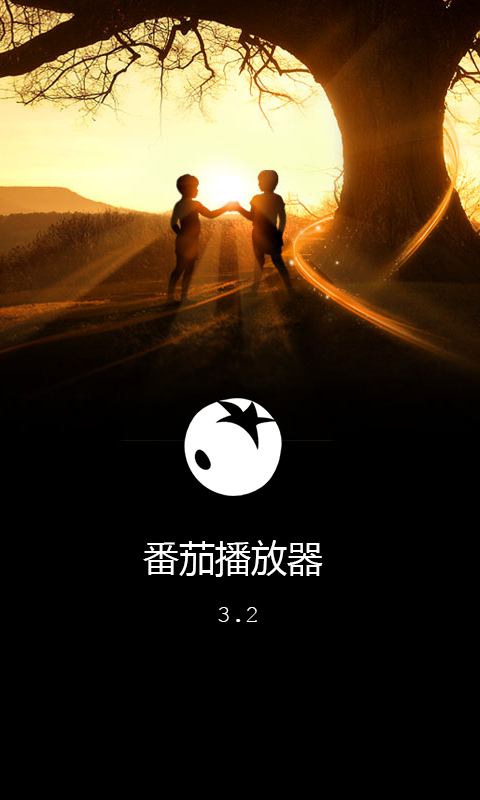
<style>
.page{position:relative;width:480px;height:800px;background:#000000}
.page>*{position:absolute;margin:0}
.t1{font:36px "MicrosoftYaHei";color:#ffffff}
.t2{font:24px "CourierNewPSMT";color:#ffffff}
</style>
<div class="page">
<p class="t1" style="left:143px;top:540px;width:180px;height:82px;text-align:center">番茄播放器 <br><span class="t2">3.2</span></p>
</div>
